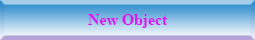
<style>
.page{position:relative;width:255px;height:40px}
.page>*{position:absolute;margin:0}
.t1{font:15.8px "TimesNewRomanPS-BoldMT";color:#d815ed}
</style>
<div class="page">
<p class="t1" style="left:88px;top:14px;width:80px;height:14px">New Object</p>
</div>
